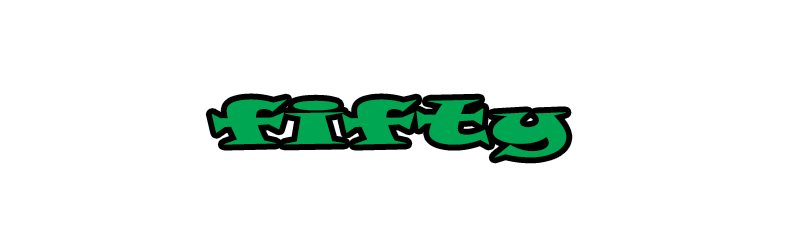
<style>
.page{position:relative;width:812px;height:249px;background:#ffffff}
.page>*{position:absolute;margin:0}
.t1{font:60px "SnapITC-Regular";color:#00a651;scale:2 1}
</style>
<div class="page">
<p class="t1" style="left:211px;top:99px;width:356px;height:59px">fifty</p>
</div>
